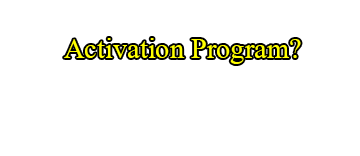
<style>
.page{position:relative;width:360px;height:156px;background:#ffffff}
.page>*{position:absolute;margin:0}
.t1{font:43px "AngsanaUPC";color:#ffff00}
</style>
<div class="page">
<p class="t1" style="left:64px;top:38px;width:237px;height:26px">Activation Program?</p>
</div>
